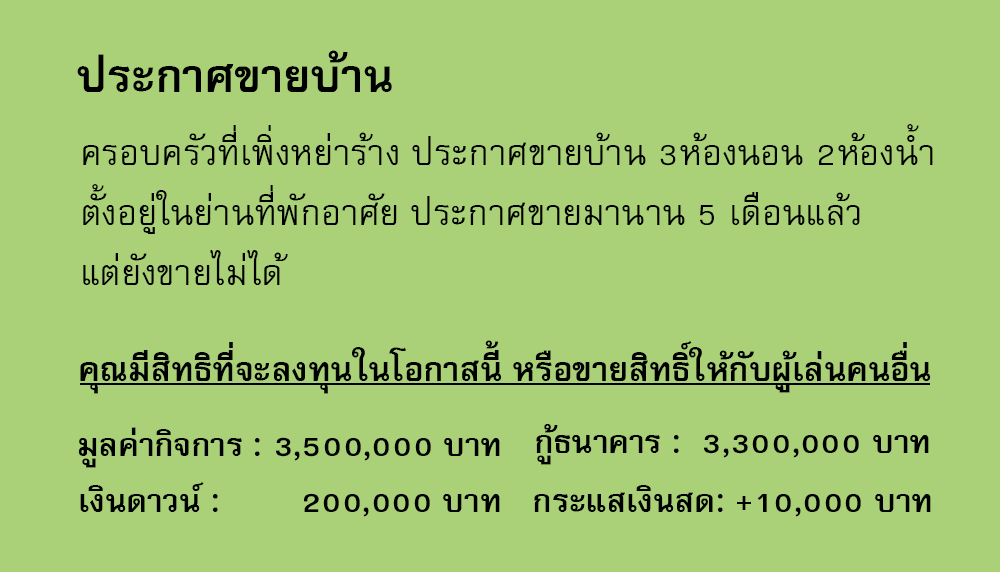
<style>
.page{position:relative;width:1000px;height:572px;background:#aad178}
.page>*{position:absolute;margin:0}
.t1{font:64px "FreesiaUPCBold";color:#000000}
.t2{font:50px/60px "FreesiaUPC";color:#000000}
.t3{font:47px "FreesiaUPCBold";color:#000000}
.t4{font:45px "FreesiaUPCBold";color:#000000}
</style>
<div class="page">
<p class="t1" style="left:77px;top:50px;width:315px;height:42px">ประกาศขายบ้าน</p>
<p class="t2" style="left:83px;top:124px;width:850px;height:161px">ครอบครัวที่เพิ่งหย่าร้าง ประกาศขายบ้าน 3ห้องนอน 2ห้องน้ำ<br>ตั้งอยู่ในย่านที่พักอาศัย ประกาศขายมานาน 5 เดือนแล้ว<br>แต่ยังขายไม่ได้</p>
<p class="t3" style="left:80px;top:340px;width:851px;height:54px">คุณมีสิทธิที่จะลงทุนในโอกาสนี้ หรือขายสิทธิ์ให้กับผู้เล่นคนอื่น</p>
<p class="t4" style="left:536px;top:424px;width:393px;height:41px">กู้ธนาคาร :  3,300,000 บาท</p>
<p class="t4" style="left:78px;top:427px;width:422px;height:41px">มูลค่ากิจการ : 3,500,000 บาท</p>
<p class="t4" style="left:80px;top:481px;width:420px;height:36px">เงินดาวน์ :        200,000 บาท</p>
<p class="t4" style="left:534px;top:485px;width:397px;height:32px">กระแสเงินสด: +10,000 บาท</p>
</div>
